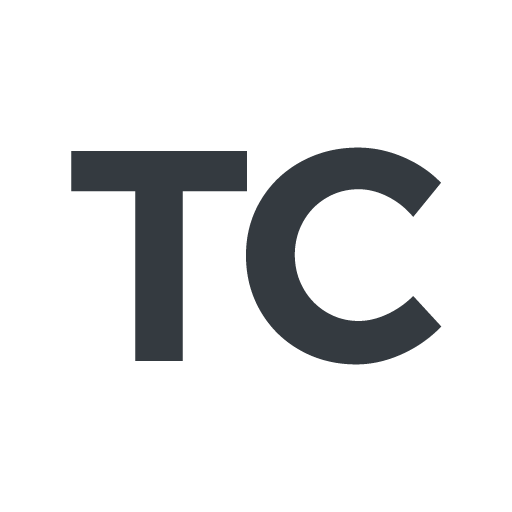
<style>
.page{position:relative;width:512px;height:512px;background:#ffffff}
.page>*{position:absolute;margin:0}
.t1{font:300px "Montserrat-SemiBold";color:#343a40}
</style>
<div class="page">
<p class="t1" style="left:71px;top:147px;width:371px;height:218px">TC</p>
</div>
